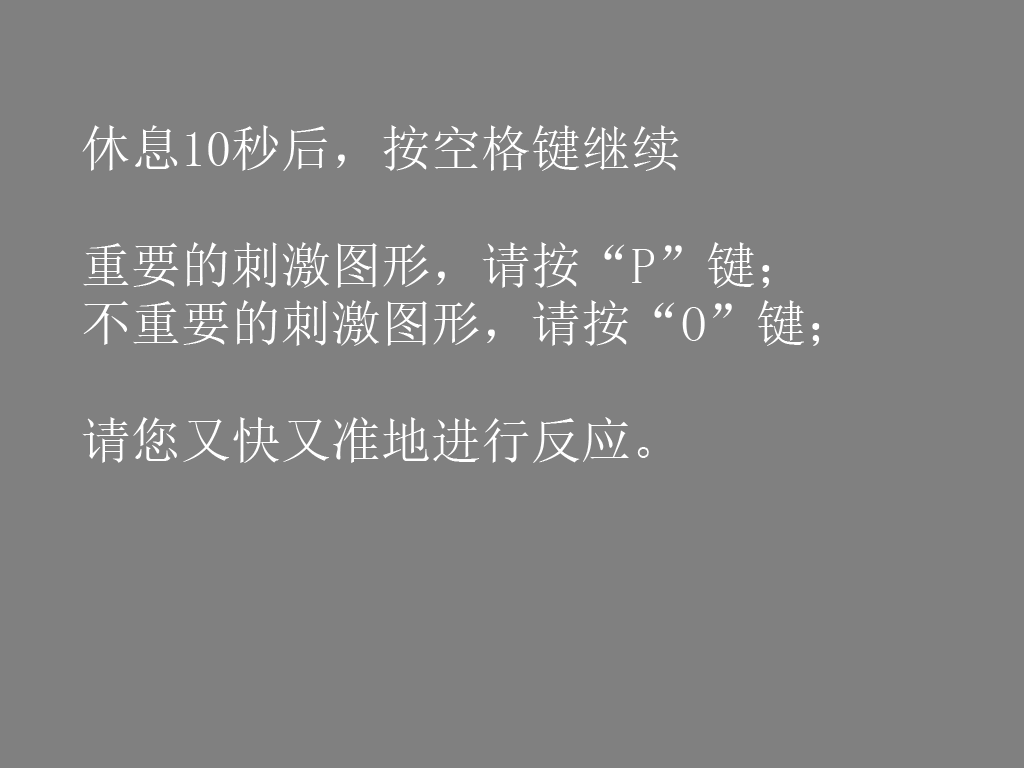
<style>
.page{position:relative;width:1024px;height:768px;background:#808080}
.page>*{position:absolute;margin:0}
.t1{font:50px/58.3px "SimSun";color:#ffffff}
</style>
<div class="page">
<p class="t1" style="left:82px;top:125px;width:738px;height:338px">休息10秒后，按空格键继续<br><br>重要的刺激图形，请按“P”键；<br>不重要的刺激图形，请按“O”键；<br><br>请您又快又准地进行反应。</p>
</div>
